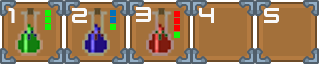
<style>
.page{position:relative;width:320px;height:64px;background:#a3703a}
.page>*{position:absolute;margin:0}
.t1{font:24px "KenVector-Future";letter-spacing:-0.16em;color:#f9f9f9}
</style>
<div class="page">
<p class="t1" style="left:8px;top:8px;width:7px;height:15px">1</p>
<p class="t1" style="left:72px;top:8px;width:15px;height:15px">2</p>
<p class="t1" style="left:136px;top:7px;width:15px;height:15px">3</p>
<p class="t1" style="left:199px;top:8px;width:15px;height:15px">4</p>
<p class="t1" style="left:264px;top:8px;width:15px;height:15px">5</p>
</div>
